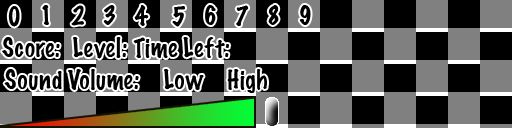
<style>
.page{position:relative;width:512px;height:128px;background:#000000}
.page>*{position:absolute;margin:0}
.t1{font:24px "MarkerFelt-Thin";color:#000000}
</style>
<div class="page">
<p class="t1" style="left:8px;top:5px;width:303px;height:22px">0   1   2   3   4    5   6   7   8   9</p>
<p class="t1" style="left:2px;top:37px;width:228px;height:22px">Score:  Level: Time Left:</p>
<p class="t1" style="left:4px;top:69px;width:263px;height:24px">Sound Volume:    Low    High</p>
</div>
